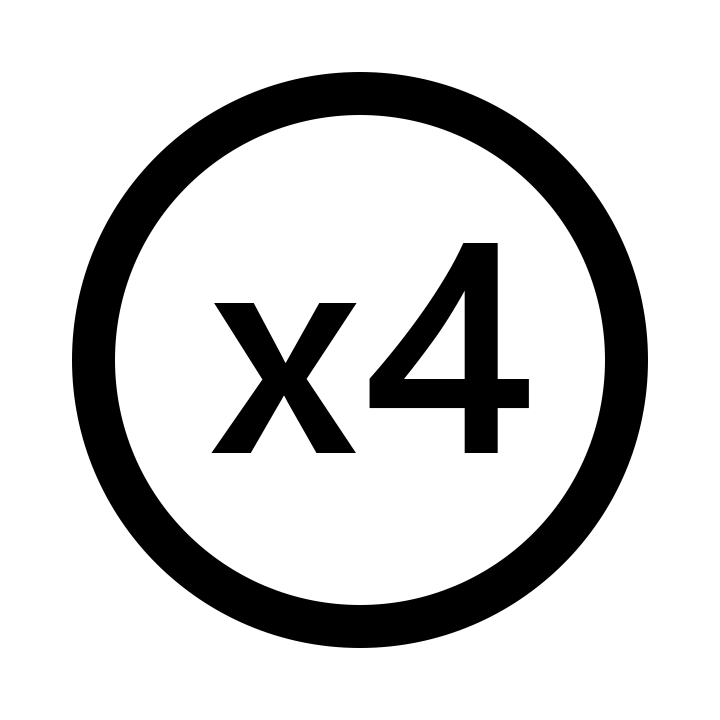
<style>
.page{position:relative;width:720px;height:720px;background:#ffffff}
.page>*{position:absolute;margin:0}
.t1{font:300px "SegoeUI-Semibold";letter-spacing:0.01em;color:#000000}
</style>
<div class="page">
<p class="t1" style="left:211px;top:243px;width:318px;height:210px">x4</p>
</div>
